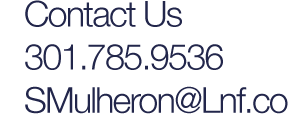
<style>
.page{position:relative;width:288px;height:121px;background:#ffffff}
.page>*{position:absolute;margin:0}
.t1{font:35.9px "HelveticaNeue-Light";letter-spacing:-0.05em;color:#22264b}
</style>
<div class="page">
<p class="t1" style="left:25px;top:0px;width:263px;height:114px">Contact Us<br>301.785.9536<br>SMulheron@Lnf.co</p>
</div>
